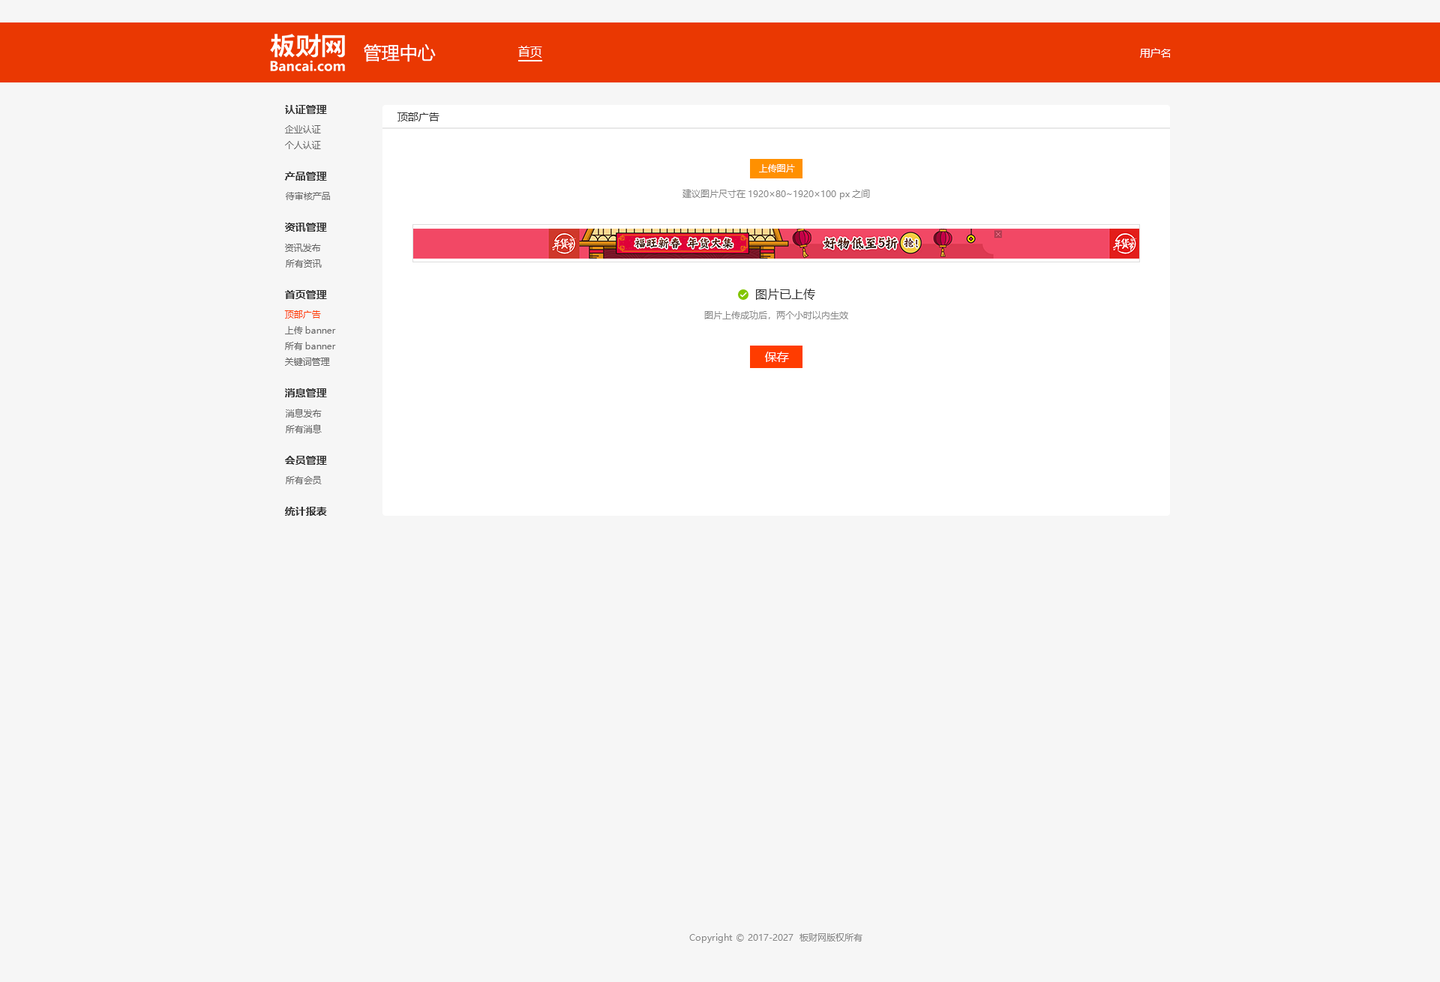
<style>
.page{position:relative;width:1440px;height:982px;background:#f6f6f6}
.page>*{position:absolute;margin:0}
.t1{font:18px "MicrosoftYaHei";color:#ffffff}
.t2{font:12px "MicrosoftYaHei";color:#ffffff}
.t3{font:10.5px "MicrosoftYaHei";color:#ffffff}
.t4{font:10.5px "MicrosoftYaHei-Bold";color:#333333}
.t5{font:10.5px "MicrosoftYaHei";color:#333333}
.t6{font:9px "MicrosoftYaHei";color:#666666}
.t7{font:9px "MicrosoftYaHei";color:#fffefe}
.t8{font:9px "MicrosoftYaHei";color:#888888}
.t9{font:12px "MicrosoftYaHei";color:#333333}
.t10{font:9px "MicrosoftYaHei";color:#ff3c00}
.t11{font:12px "MicrosoftYaHei";color:#fffefe}
</style>
<div class="page">
<p class="t1" style="left:364px;top:44px;width:72px;height:18px">管理中心</p>
<p class="t2" style="left:518px;top:46px;width:24px;height:12px">首页</p>
<p class="t3" style="left:1140px;top:48px;width:31px;height:10px">用户名</p>
<p class="t4" style="left:285px;top:105px;width:42px;height:9px">认证管理</p>
<p class="t5" style="left:397px;top:112px;width:43px;height:10px">顶部广告</p>
<p class="t6" style="left:285px;top:125px;width:36px;height:9px">企业认证</p>
<p class="t6" style="left:285px;top:141px;width:36px;height:8px">个人认证</p>
<p class="t4" style="left:284px;top:172px;width:43px;height:9px">产品管理</p>
<p class="t7" style="left:759px;top:164px;width:36px;height:8px">上传图片</p>
<p class="t6" style="left:286px;top:192px;width:44px;height:8px">待审核产品</p>
<p class="t8" style="left:682px;top:189px;width:188px;height:11px">建议图片尺寸在1920×80~1920×100 px之间</p>
<p class="t4" style="left:285px;top:223px;width:42px;height:9px">资讯管理</p>
<p class="t6" style="left:285px;top:244px;width:36px;height:8px">资讯发布</p>
<p class="t6" style="left:286px;top:260px;width:36px;height:8px">所有资讯</p>
<p class="t4" style="left:285px;top:290px;width:42px;height:9px">首页管理</p>
<p class="t9" style="left:756px;top:289px;width:59px;height:11px">图片已上传</p>
<p class="t10" style="left:284px;top:310px;width:37px;height:9px">顶部广告</p>
<p class="t8" style="left:704px;top:310px;width:144px;height:10px">图片上传成功后，两个小时以内生效</p>
<p class="t6" style="left:285px;top:326px;width:51px;height:8px">上传banner</p>
<p class="t6" style="left:285px;top:342px;width:51px;height:8px">所有banner</p>
<p class="t11" style="left:765px;top:352px;width:24px;height:10px">保存</p>
<p class="t6" style="left:285px;top:358px;width:45px;height:8px">关键词管理</p>
<p class="t4" style="left:285px;top:388px;width:42px;height:10px">消息管理</p>
<p class="t6" style="left:286px;top:409px;width:36px;height:9px">消息发布</p>
<p class="t6" style="left:286px;top:424px;width:36px;height:10px">所有消息</p>
<p class="t4" style="left:285px;top:456px;width:42px;height:9px">会员管理</p>
<p class="t6" style="left:286px;top:476px;width:36px;height:8px">所有会员</p>
<p class="t4" style="left:285px;top:507px;width:42px;height:9px">统计报表</p>
<p class="t8" style="left:689px;top:934px;width:173px;height:10px">Copyright © 2017-2027  板财网版权所有</p>
</div>
